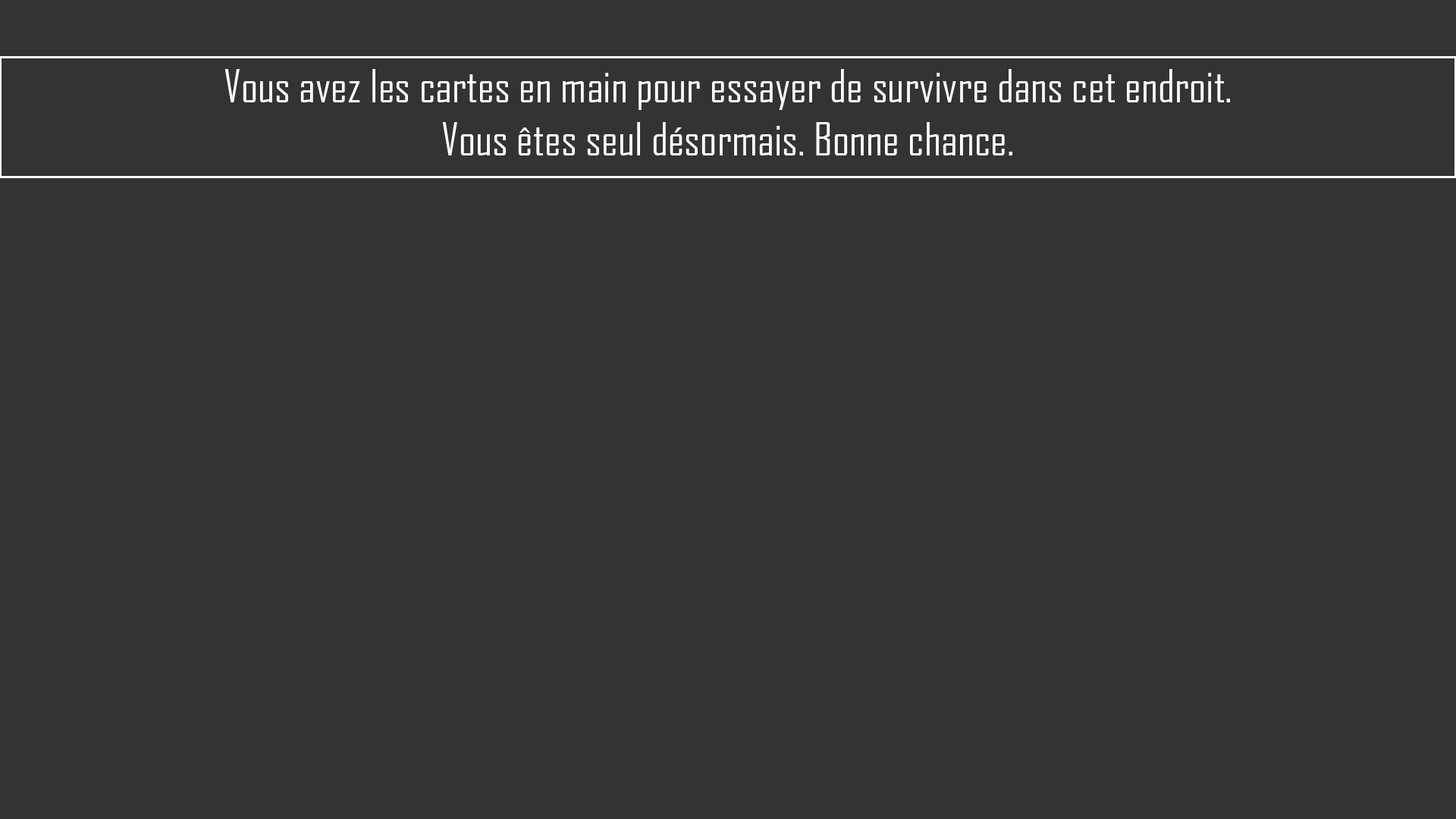
<style>
.page{position:relative;width:1456px;height:819px;background:#333333}
.page>*{position:absolute;margin:0}
.t1{font:44.2px "AgencyFB-Reg";color:#ffffff}
</style>
<div class="page">
<p class="t1" style="left:224px;top:69px;width:1006px;height:86px;text-align:center">Vous avez les cartes en main pour essayer de survivre dans cet endroit.<br>Vous êtes seul désormais. Bonne chance.</p>
</div>
